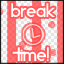
<style>
.page{position:relative;width:64px;height:64px}
.page>*{position:absolute;margin:0}
.t1{font:16px "StarAvenue";color:#ffffff}
</style>
<div class="page">
<p class="t1" style="left:11px;top:3px;width:44px;height:58px;text-align:center">Break<br><br><br>Time!</p>
</div>
